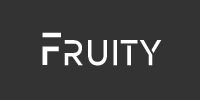
<style>
.page{position:relative;width:200px;height:100px;background:#333333}
.page>*{position:absolute;margin:0}
.t1{font:52px "DESIGNERRegular";color:#fefefe}
</style>
<div class="page">
<p class="t1" style="left:42px;top:32px;width:120px;height:34px">Fruity</p>
</div>
